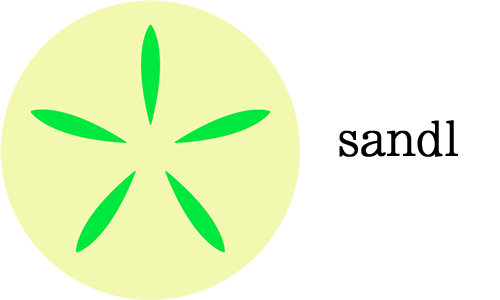
<style>
.page{position:relative;width:500px;height:300px;background:#ffffff}
.page>*{position:absolute;margin:0}
.t1{font:50px "LiSongPro";color:#000000;font-weight:bold}
</style>
<div class="page">
<p class="t1" style="left:339px;top:120px;width:119px;height:37px">sandl</p>
</div>
